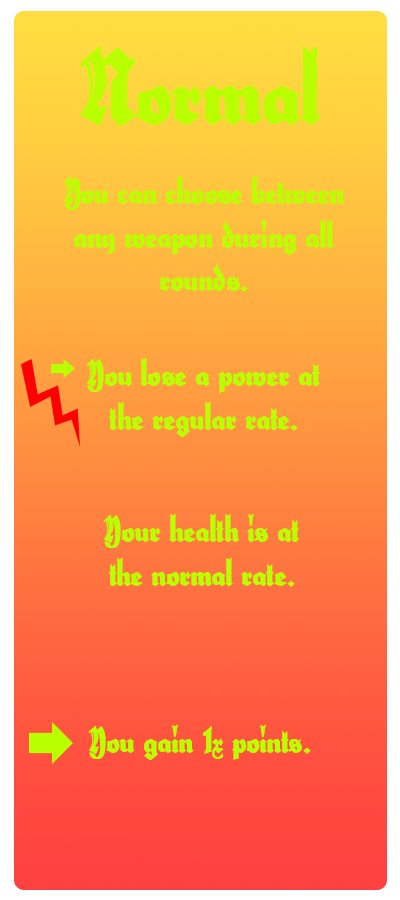
<style>
.page{position:relative;width:400px;height:900px}
.page>*{position:absolute;margin:0}
.t1{font:100px "HerzogVonGraf";color:#baff00}
.t2{font:36px "HerzogVonGraf";color:#baff00}
</style>
<div class="page">
<p class="t1" style="left:80px;top:45px;width:241px;height:81px">Normal</p>
<p class="t2" style="left:63px;top:175px;width:282px;height:117px;text-align:center">You can choose between any weapon during all rounds.</p>
<p class="t2" style="left:86px;top:357px;width:234px;height:80px;text-align:center">You lose a power at the regular rate.</p>
<p class="t2" style="left:103px;top:513px;width:196px;height:74px;text-align:center">Your health is at the normal rate.</p>
<p class="t2" style="left:88px;top:724px;width:223px;height:36px">You gain 1x points.</p>
</div>
